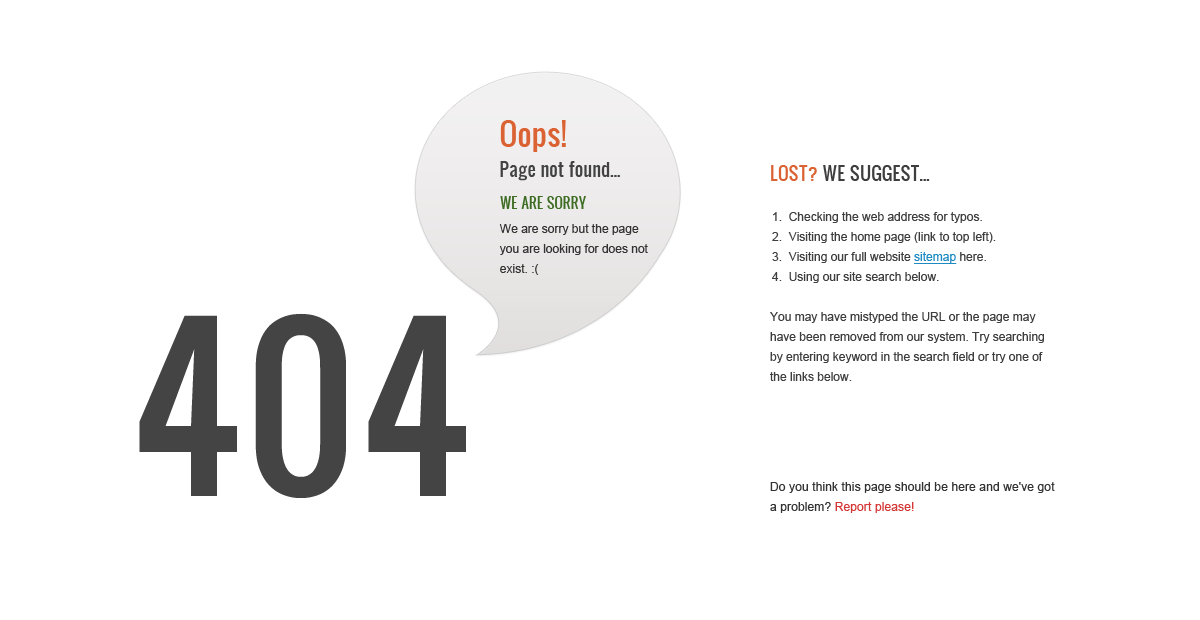
<style>
.page{position:relative;width:1200px;height:620px;background:#ffffff}
.page>*{position:absolute;margin:0}
.t1{font:18px/30px "Oswald";color:#424242}
.t2{font:30px/30px "Oswald";color:#da6233}
.t3{font:18px "Oswald";color:#3e3e3e;text-transform:uppercase}
.t4{font:18px "Oswald";color:#da6233;text-transform:uppercase}
.t5{font:14px "Oswald";color:#3d6d23;text-transform:uppercase}
.t6{font:12px/20px "ArialMT";color:#3e3e3e}
.t7{font:12px/20px "ArialMT";color:#1d8ac2;text-decoration:underline}
.t8{font:12px/20px "ArialMT";color:#333333}
.t9{font:206px "Oswald";color:#444444;text-transform:uppercase}
.t10{font:12px/20px "ArialMT";letter-spacing:0.01em;color:#333333}
.t11{font:12px/20px "ArialMT";letter-spacing:0.01em;color:#d53737}
</style>
<div class="page">
<p class="t1" style="left:500px;top:120px;width:120px;height:61px"><span class="t2">Oops!<br></span>Page not found...</p>
<p class="t3" style="left:771px;top:165px;width:159px;height:16px"><span class="t4">Lost?</span> We suggest...</p>
<p class="t5" style="left:500px;top:196px;width:86px;height:13px">We are sorry</p>
<p class="t6" style="left:772px;top:212px;width:224px;height:71px">1.  Checking the web address for typos.<br>2.  Visiting the home page (link to top left).<br>3.  Visiting our full website <span class="t7">sitemap</span> here.<br>4.  Using our site search below.</p>
<p class="t8" style="left:499px;top:224px;width:149px;height:51px">We are sorry but the page you are looking for does not exist. :(</p>
<p class="t9" style="left:139px;top:313px;width:327px;height:185px">404</p>
<p class="t6" style="left:770px;top:312px;width:274px;height:69px">You may have mistyped the URL or the page may have been removed from our system. Try searching by entering keyword in the search field or try one of the links below.</p>
<p class="t10" style="left:770px;top:482px;width:285px;height:31px">Do you think this page should be here and we've got a problem? <span class="t11">Report please!</span></p>
</div>
